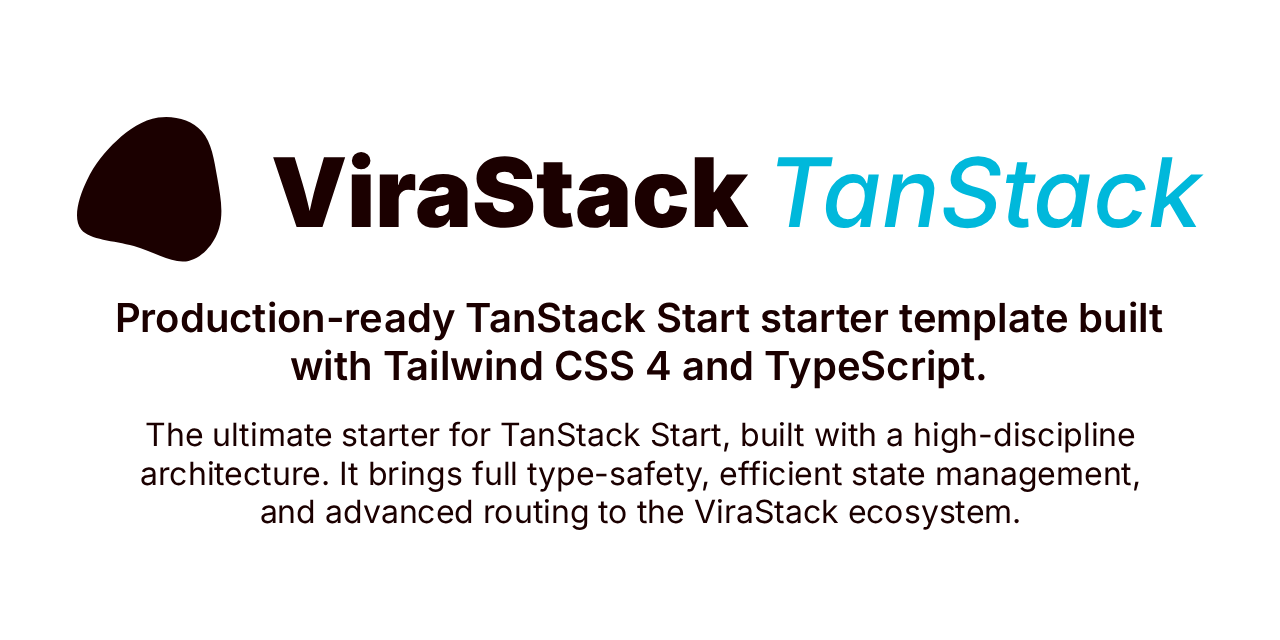
<style>
.page{position:relative;width:1280px;height:640px;background:#ffffff}
.page>*{position:absolute;margin:0}
.t1{font:96px "Inter-Black";color:#1b0000}
.t2{font:96px "Inter-MediumItalic";color:#00b8db}
.t3{font:40px "Inter-SemiBold";color:#1b0000}
.t4{font:32px "Inter-Regular";color:#1b0000}
</style>
<div class="page">
<p class="t1" style="left:273px;top:152px;width:931px;height:77px">ViraStack <span class="t2">TanStack</span></p>
<p class="t3" style="left:117px;top:301px;width:1046px;height:88px;text-align:center">Production-ready TanStack Start starter template built with Tailwind CSS 4 and TypeScript.</p>
<p class="t4" style="left:141px;top:421px;width:998px;height:109px;text-align:center">The ultimate starter for TanStack Start, built with a high-discipline architecture. It brings full type-safety, efficient state management, and advanced routing to the ViraStack ecosystem.</p>
</div>
